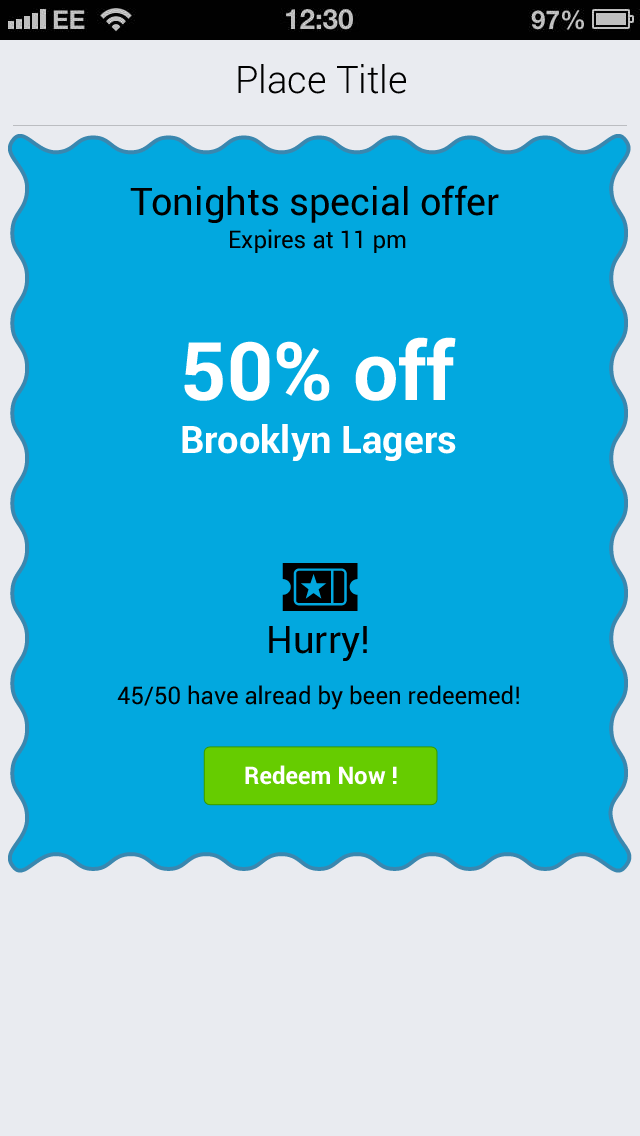
<style>
.page{position:relative;width:640px;height:1136px;background:#02a8df}
.page>*{position:absolute;margin:0}
.t1{font:38px "Roboto-Light";color:#000000}
.t2{font:38px "Roboto-Regular";color:#000000}
.t3{font:24px "Roboto-Regular";color:#000000}
.t4{font:80.7px "Roboto-Bold";color:#ffffff}
.t5{font:38px "Roboto-Bold";color:#ffffff}
.t6{font:24px "Roboto-Bold";color:#ffffff}
</style>
<div class="page">
<p class="t1" style="left:238px;top:64px;width:168px;height:30px">Place Title</p>
<p class="t2" style="left:130px;top:185px;width:369px;height:38px">Tonights special offer</p>
<p class="t3" style="left:230px;top:229px;width:176px;height:24px">Expires at 11 pm</p>
<p class="t4" style="left:184px;top:337px;width:272px;height:64px">50% off</p>
<p class="t5" style="left:182px;top:424px;width:274px;height:37px">Brooklyn Lagers</p>
<p class="t2" style="left:269px;top:626px;width:98px;height:35px">Hurry!</p>
<p class="t3" style="left:117px;top:685px;width:402px;height:25px">45/50 have alread by been redeemed!</p>
<p class="t6" style="left:245px;top:765px;width:152px;height:20px">Redeem Now !</p>
</div>
